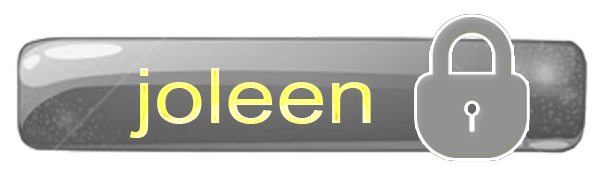
<style>
.page{position:relative;width:599px;height:193px;background:#ffffff}
.page>*{position:absolute;margin:0}
.t1{font:76.6px "ArialUnicodeMS";scale:1.19 1}
</style>
<div class="page">
<p class="t1" style="left:129px;top:68px;width:242px;height:70px">joleen</p>
</div>
